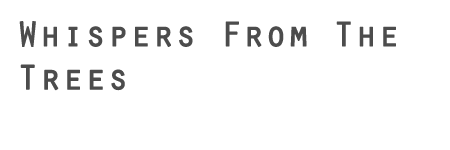
<style>
.page{position:relative;width:450px;height:150px;background:#ffffff}
.page>*{position:absolute;margin:0}
.t1{font:36px "OratorStd";color:#4c4c4c;font-weight:bold}
</style>
<div class="page">
<p class="t1" style="left:19px;top:21px;width:377px;height:70px">Whispers From The<br>Trees</p>
</div>
